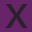
<style>
.page{position:relative;width:32px;height:32px;background:#682468}
.page>*{position:absolute;margin:0}
.t1{font:49.8px "MyriadPro-Regular";color:#292329}
</style>
<div class="page">
<p class="t1" style="left:5px;top:4px;width:23px;height:24px">x</p>
</div>
